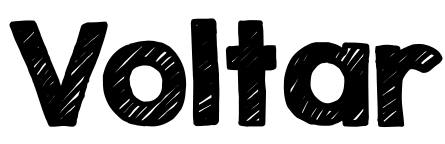
<style>
.page{position:relative;width:445px;height:144px;background:#ffffff}
.page>*{position:absolute;margin:0}
.t1{font:125px "KGSecondChancesSketch";color:#000000;font-weight:bold}
</style>
<div class="page">
<p class="t1" style="left:9px;top:18px;width:434px;height:110px">Voltar</p>
</div>
